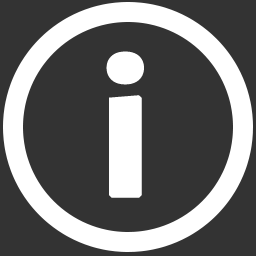
<style>
.page{position:relative;width:256px;height:256px;background:#333333}
.page>*{position:absolute;margin:0}
.t1{font:183.6px "BreezeSans-Bold";color:#ffffff;font-weight:bold;scale:1.05 1}
</style>
<div class="page">
<p class="t1" style="left:106px;top:51px;width:38px;height:147px">i</p>
</div>
